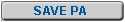
<style>
.page{position:relative;width:125px;height:22px;background:#cccccc}
.page>*{position:absolute;margin:0}
.t1{font:12px "Arial-BoldMT";letter-spacing:0.06em;color:#005596}
</style>
<div class="page">
<p class="t1" style="left:34px;top:6px;width:52px;height:9px">SAVE PA</p>
</div>
